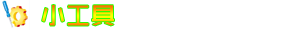
<style>
.page{position:relative;width:300px;height:30px;background:#ffffff}
.page>*{position:absolute;margin:0}
.t1{font:25px "ZHSRXT--GBK1-0"}
</style>
<div class="page">
<p class="t1" style="left:42px;top:5px;width:72px;height:21px">小工具</p>
</div>
